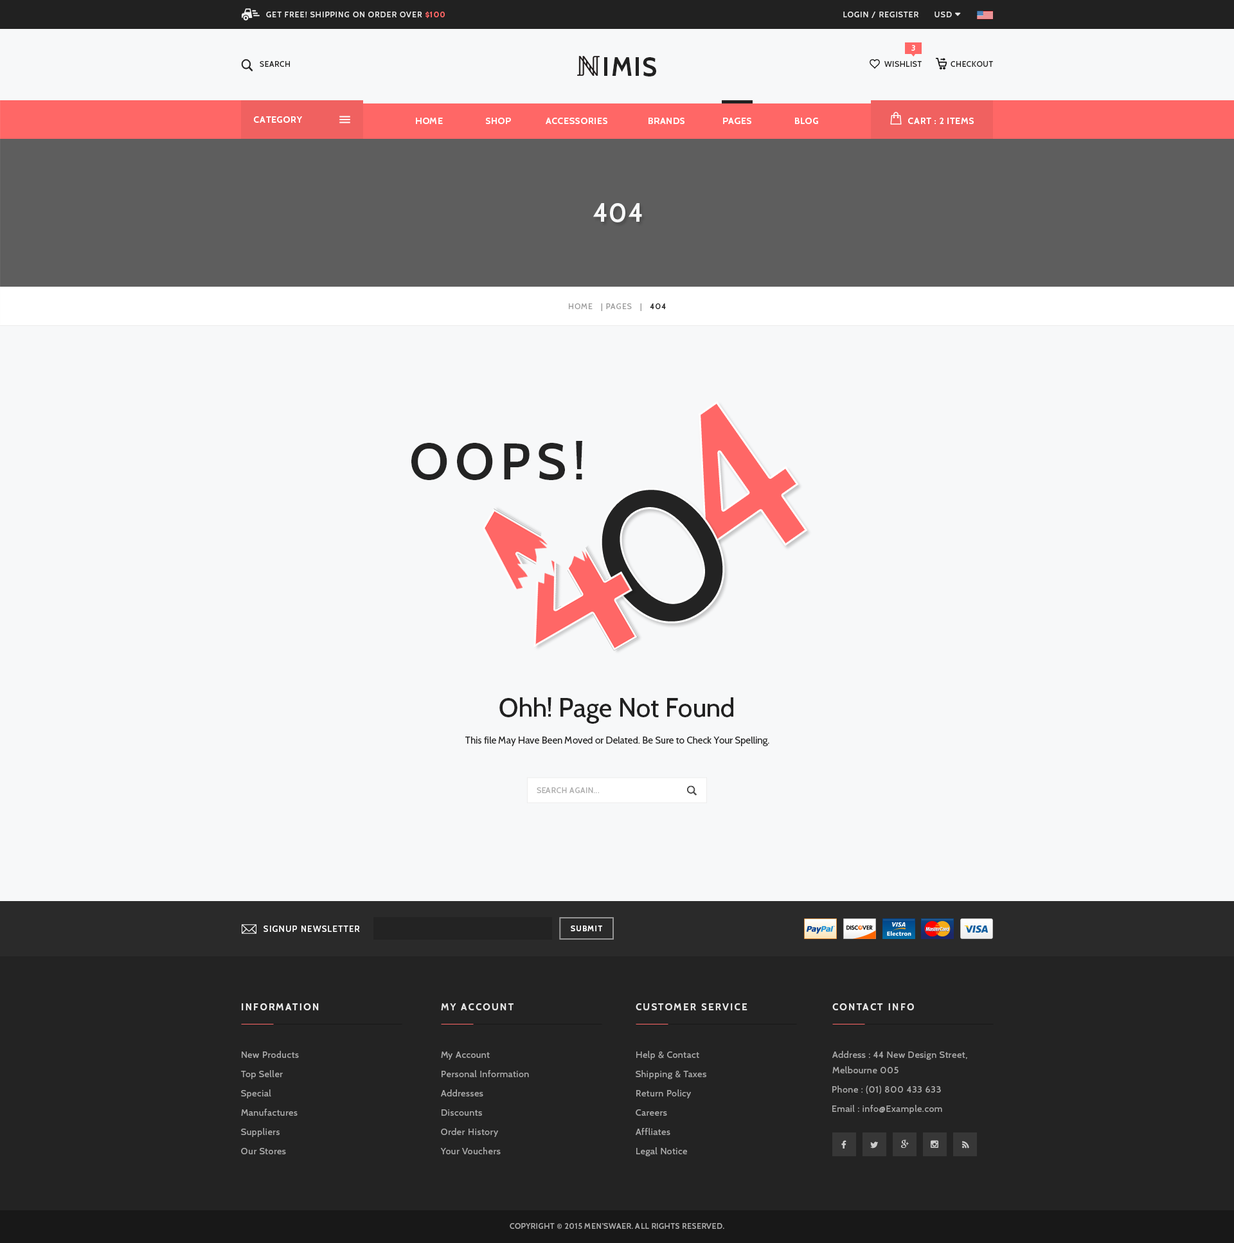
<style>
.page{position:relative;width:1234px;height:1243px;background:#f7f8f9}
.page>*{position:absolute;margin:0}
.t1{font:7.7px "Cabin-Medium";letter-spacing:0.1em;color:#e8e8e8;text-transform:uppercase}
.t2{font:7.7px "Cabin-Bold";letter-spacing:0.1em;color:#ff6766;text-transform:uppercase}
.t3{font:7.7px "Cabin-SemiBold";letter-spacing:0.05em;color:#ffffff;text-transform:uppercase}
.t4{font:7.7px "Cabin-Medium";letter-spacing:0.05em;color:#212121;text-transform:uppercase}
.t5{font:25.7px "Cabin-Bold";letter-spacing:0.05em;color:#212121;text-transform:uppercase}
.t6{font:9px "Cabin-Bold";letter-spacing:0.05em;color:#ffffff;text-transform:uppercase}
.t7{font:25.7px "Cabin-Bold";letter-spacing:0.05em;color:#f7f8f9;text-transform:uppercase}
.t8{font:7.7px "Cabin-Regular";letter-spacing:0.1em;color:#999999;text-transform:uppercase}
.t9{font:7.7px "Cabin-SemiBold";letter-spacing:0.1em;color:#212121;text-transform:uppercase}
.t10{font:225px "Cabin-SemiBold";letter-spacing:0.05em;color:#ff6766;text-transform:uppercase}
.t11{font:51.4px "Cabin-SemiBold";letter-spacing:0.12em;color:#232323;text-transform:uppercase}
.t12{font:192.9px "Cabin-SemiBold";letter-spacing:0.05em;color:#232323;text-transform:uppercase}
.t13{font:25.7px "Cabin-Medium";color:#212121}
.t14{font:9.6px "Cabin-Regular";color:#212121}
.t15{font:7.7px "Cabin-Regular";letter-spacing:0.05em;color:#aaaaaa;text-transform:uppercase}
.t16{font:8.4px "Cabin-Medium";letter-spacing:0.1em;color:#ffffff;text-transform:uppercase}
.t17{font:7.7px "Cabin-SemiBold";letter-spacing:0.1em;color:#ffffff;text-transform:uppercase}
.t18{font:9.6px "Cabin-Bold";letter-spacing:0.15em;color:#eeeeee;text-transform:uppercase}
.t19{font:9.6px "Cabin-Bold";letter-spacing:0.15em;color:#e8e8e8;text-transform:uppercase}
.t20{font:9px "Cabin-Regular";letter-spacing:0.05em;color:#aaaaaa}
.t21{font:9px/15.4px "Cabin-Regular";letter-spacing:0.05em;color:#aaaaaa}
.t22{font:7.7px "Cabin-Medium";letter-spacing:0.05em;color:#aaaaaa;text-transform:uppercase}
</style>
<div class="page">
<p class="t1" style="left:266px;top:12px;width:179px;height:6px">get free! shipping on order over <span class="t2">$100</span></p>
<p class="t1" style="left:843px;top:12px;width:76px;height:6px">login / register</p>
<p class="t3" style="left:912px;top:45px;width:3px;height:6px">3</p>
<p class="t4" style="left:260px;top:61px;width:30px;height:6px">search</p>
<p class="t5" style="left:604px;top:57px;width:52px;height:19px">imis</p>
<p class="t4" style="left:885px;top:61px;width:37px;height:6px">wishlist</p>
<p class="t4" style="left:951px;top:61px;width:42px;height:6px">checkout</p>
<p class="t6" style="left:254px;top:116px;width:48px;height:7px">category</p>
<p class="t6" style="left:416px;top:118px;width:402px;height:6px">home                 shop              accessories                brands               pages                 Blog</p>
<p class="t6" style="left:908px;top:118px;width:66px;height:6px">cart : 2 items</p>
<p class="t7" style="left:593px;top:203px;width:49px;height:19px">404</p>
<p class="t8" style="left:569px;top:303px;width:97px;height:8px">home   | Pages   |  <span class="t9"> 404</span></p>
<p class="t10" style="left:699px;top:401px;width:109px;height:149px;rotate:-35deg">4</p>
<p class="t11" style="left:411px;top:441px;width:171px;height:39px">oops!</p>
<p class="t12" style="left:600px;top:488px;width:125px;height:136px;rotate:-35deg">0</p>
<p class="t13" style="left:500px;top:698px;width:234px;height:26px">Ohh! Page Not Found</p>
<p class="t14" style="left:465px;top:737px;width:305px;height:9px">This file May Have Been Moved or Delated. Be Sure to Check Your Spelling.</p>
<p class="t15" style="left:537px;top:788px;width:62px;height:5px">search again...</p>
<p class="t16" style="left:264px;top:926px;width:96px;height:6px">signup newsletter</p>
<p class="t17" style="left:571px;top:926px;width:31px;height:6px">Submit</p>
<p class="t18" style="left:242px;top:1004px;width:77px;height:7px">information</p>
<p class="t19" style="left:441px;top:1004px;width:73px;height:7px">my account</p>
<p class="t19" style="left:636px;top:1004px;width:112px;height:7px">customer service</p>
<p class="t19" style="left:833px;top:1004px;width:81px;height:7px">contact Info</p>
<p class="t20" style="left:242px;top:1051px;width:57px;height:7px">New Products</p>
<p class="t20" style="left:441px;top:1052px;width:49px;height:8px">My Account</p>
<p class="t20" style="left:636px;top:1051px;width:63px;height:9px">Help &amp; Contact</p>
<p class="t21" style="left:833px;top:1051px;width:135px;height:23px">Address : 44 New Design Street,<br>Melbourne 005</p>
<p class="t20" style="left:241px;top:1070px;width:42px;height:9px">Top Seller</p>
<p class="t20" style="left:442px;top:1070px;width:87px;height:7px">Personal Information</p>
<p class="t20" style="left:636px;top:1070px;width:70px;height:9px">Shipping &amp; Taxes</p>
<p class="t20" style="left:833px;top:1086px;width:108px;height:8px">Phone : (01) 800 433 633</p>
<p class="t20" style="left:241px;top:1090px;width:30px;height:9px">Special</p>
<p class="t20" style="left:441px;top:1090px;width:42px;height:7px">Addresses</p>
<p class="t20" style="left:636px;top:1090px;width:55px;height:9px">Return Policy</p>
<p class="t20" style="left:241px;top:1109px;width:57px;height:7px">Manufactures</p>
<p class="t20" style="left:442px;top:1110px;width:40px;height:6px">Discounts</p>
<p class="t20" style="left:636px;top:1110px;width:31px;height:6px">Careers</p>
<p class="t20" style="left:833px;top:1105px;width:109px;height:9px">Email : info@Example.com</p>
<p class="t20" style="left:241px;top:1128px;width:39px;height:9px">Suppliers</p>
<p class="t20" style="left:441px;top:1128px;width:57px;height:9px">Order History</p>
<p class="t20" style="left:636px;top:1128px;width:34px;height:7px">Affliates</p>
<p class="t20" style="left:241px;top:1148px;width:45px;height:7px">Our Stores</p>
<p class="t20" style="left:440px;top:1148px;width:61px;height:7px">Your Vouchers</p>
<p class="t20" style="left:636px;top:1148px;width:51px;height:8px">Legal Notice</p>
<p class="t22" style="left:510px;top:1223px;width:214px;height:6px">Copyright © 2015 Men’swaer. All Rights Reserved.</p>
</div>
